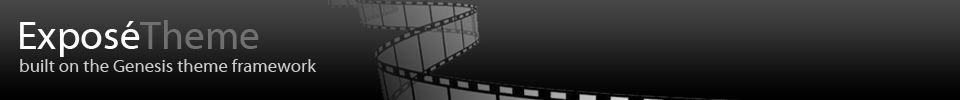
<style>
.page{position:relative;width:960px;height:100px}
.page>*{position:absolute;margin:0}
.t1{font:40px "MyriadWebPro";color:#ffffff}
.t2{font:40px "MyriadWebPro";color:#707070}
.t3{font:18px "MyriadWebPro";color:#cccccc}
</style>
<div class="page">
<p class="t1" style="left:20px;top:20px;width:239px;height:37px">Exposé<span class="t2">Theme</span></p>
<p class="t3" style="left:20px;top:59px;width:297px;height:13px">built on the Genesis theme framework</p>
</div>
